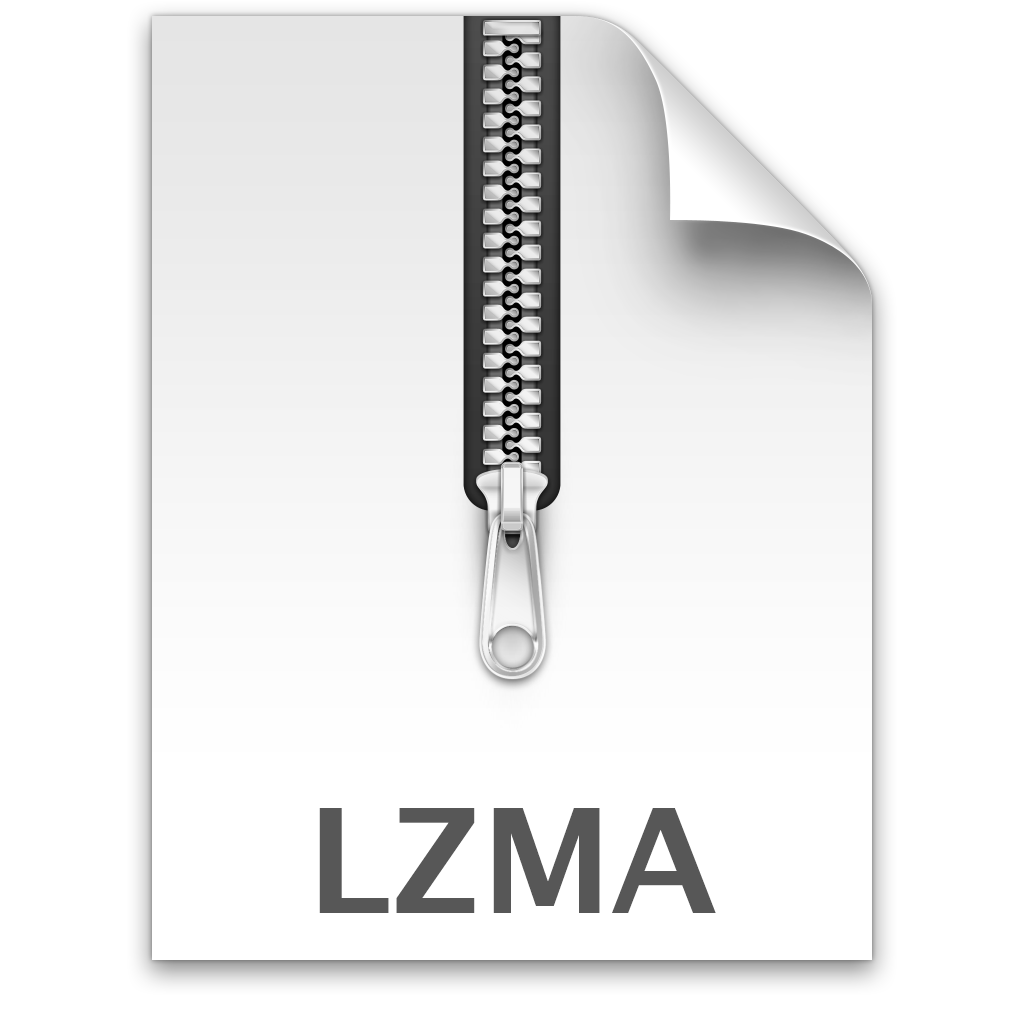
<style>
.page{position:relative;width:1024px;height:1024px;background:#ffffff}
.page>*{position:absolute;margin:0}
.t1{font:145px "LucidaSans-Demi";letter-spacing:-0.013em;color:#575757}
</style>
<div class="page">
<p class="t1" style="left:319px;top:808px;width:397px;height:105px">LZMA</p>
</div>
